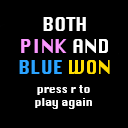
<style>
.page{position:relative;width:128px;height:128px;background:#000000}
.page>*{position:absolute;margin:0}
.t1{font:18px "Krungthep";color:#ffffff}
.t2{font:18px "Krungthep";color:#fb97ff}
.t3{font:18px "Krungthep";color:#2ba3ff}
.t4{font:18px "Krungthep";color:#ffde02}
.t5{font:10.4px "Krungthep";color:#ffffff}
</style>
<div class="page">
<p class="t1" style="left:19px;top:17px;width:91px;height:57px;text-align:center">BOTH<span class="t2"> <br>PINK</span> AND<br><span class="t3">BLUE </span><span class="t4">WON</span></p>
<p class="t5" style="left:35px;top:85px;width:57px;height:24px;text-align:center">press r to <br>play again</p>
</div>
